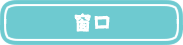
<style>
.page{position:relative;width:183px;height:45px;background:#6ecad0}
.page>*{position:absolute;margin:0}
.t1{font:12px "shetumodengxiaofangti";color:#ffffff;font-weight:bold;scale:0.94 1}
</style>
<div class="page">
<p class="t1" style="left:74px;top:13px;width:36px;height:19px">窗口</p>
</div>
